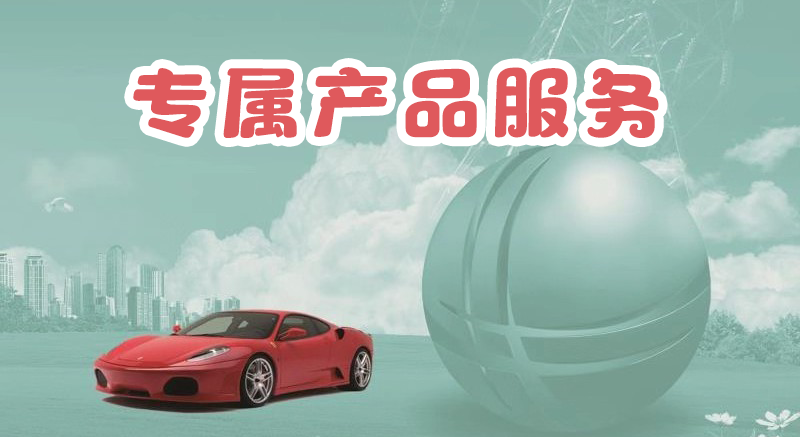
<style>
.page{position:relative;width:800px;height:437px}
.page>*{position:absolute;margin:0}
.t1{font:78.3px "ZXF-Childhood-Dream-W";letter-spacing:0.1em;color:#df595c;text-transform:uppercase;scale:1.05 1}
</style>
<div class="page">
<p class="t1" style="left:133px;top:67px;width:526px;height:71px">专属产品服务</p>
</div>
